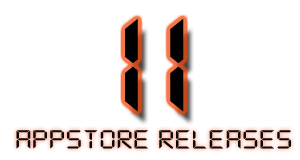
<style>
.page{position:relative;width:300px;height:160px;background:#ffffff}
.page>*{position:absolute;margin:0}
.t1{font:150.7px "DS-Digital";letter-spacing:-0.02em;color:#000000;scale:1.25 1}
.t2{font:28.7px "DS-Digital";letter-spacing:-0.02em;color:#090909;scale:1.25 1}
</style>
<div class="page">
<p class="t1" style="left:125px;top:18px;width:59px;height:94px">11</p>
<p class="t2" style="left:16px;top:130px;width:275px;height:19px">APPSTORE RELEASES</p>
</div>
